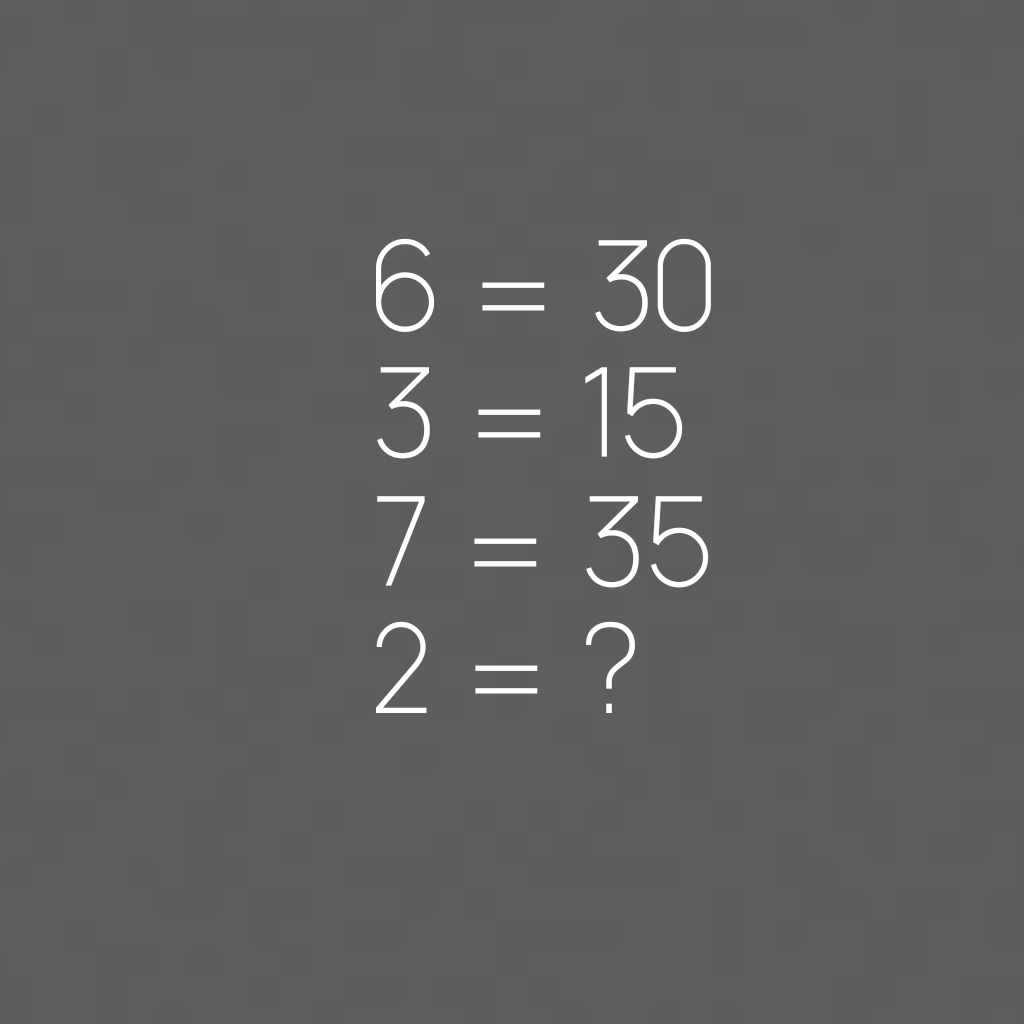
<style>
.page{position:relative;width:1024px;height:1024px;background:#5e5e5e}
.page>*{position:absolute;margin:0}
.t1{font:119.5px "Manrope-Thin";color:#ffffff;text-transform:uppercase;scale:0.97 1}
</style>
<div class="page">
<p class="t1" style="left:376px;top:238px;width:335px;height:94px">6 = 30</p>
<p class="t1" style="left:377px;top:367px;width:306px;height:92px">3 = 15</p>
<p class="t1" style="left:377px;top:496px;width:332px;height:92px">7 = 35</p>
<p class="t1" style="left:376px;top:621px;width:259px;height:92px">2 = ?</p>
</div>
